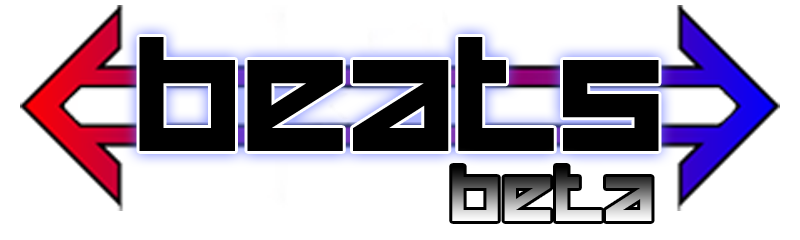
<style>
.page{position:relative;width:800px;height:240px;background:#ffffff}
.page>*{position:absolute;margin:0}
.t1{font:113.6px "HappyKiller";color:#000000;scale:1.05 1}
</style>
<div class="page">
<p class="t1" style="left:139px;top:37px;width:520px;height:114px">beats</p>
</div>
